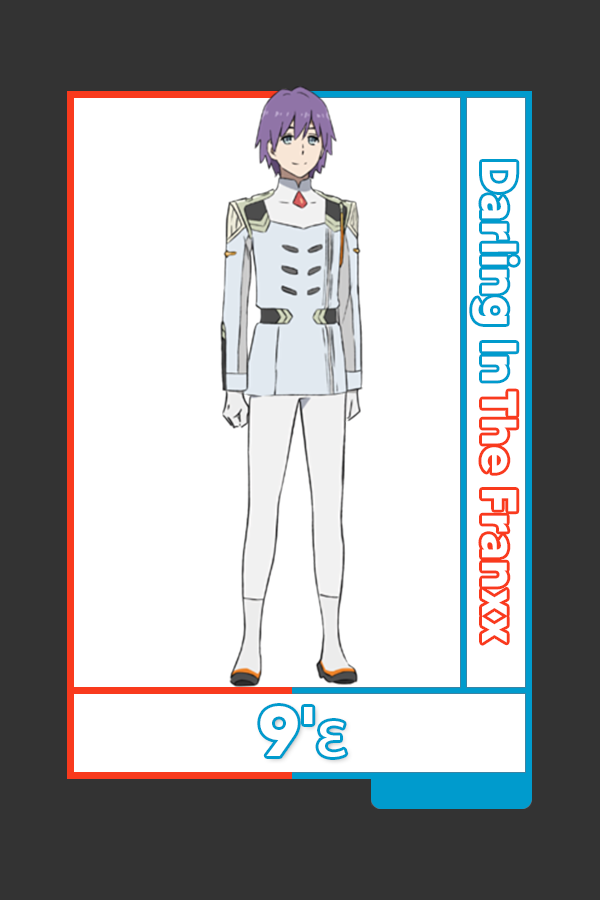
<style>
.page{position:relative;width:600px;height:900px;background:#ffffff}
.page>*{position:absolute;margin:0}
.t1{font:48.8px "MADETOMMY-Bold";color:#ffffff}
.t2{font:70.1px "MADETOMMY-Bold";color:#ffffff}
.t3{font:70.1px "MyriadPro-Regular";color:#ffffff}
</style>
<div class="page">
<p class="t1" style="left:472px;top:162px;width:46px;height:219px;rotate:90deg">Darling In</p>
<p class="t1" style="left:481px;top:391px;width:36px;height:252px;rotate:90deg">The Franxx</p>
<p class="t2" style="left:260px;top:706px;width:86px;height:51px">9'<span class="t3">ε</span></p>
</div>
